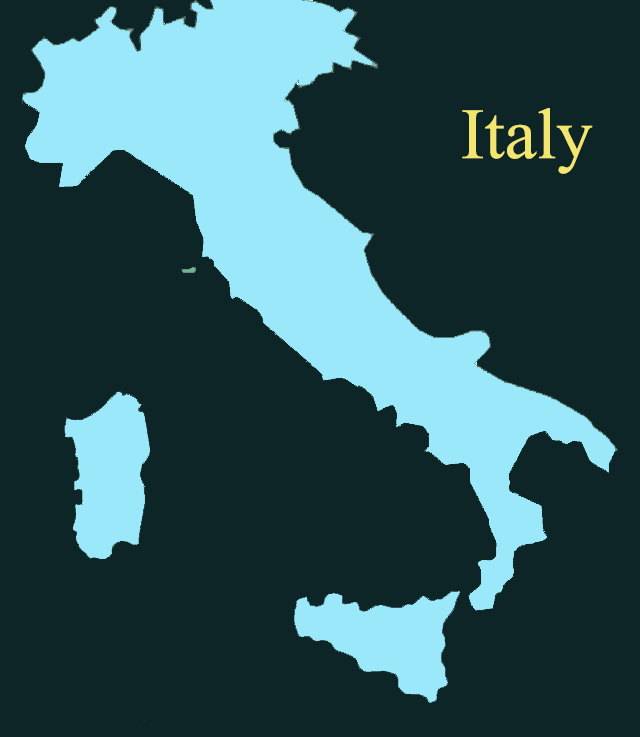
<style>
.page{position:relative;width:640px;height:737px;background:#0e2528}
.page>*{position:absolute;margin:0}
.t1{font:72px "TimesNewRomanPSMT";color:#f2e671}
</style>
<div class="page">
<p class="t1" style="left:462px;top:108px;width:131px;height:66px">Italy</p>
</div>
